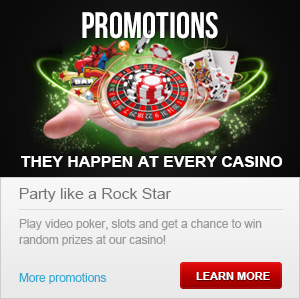
<style>
.page{position:relative;width:300px;height:299px}
.page>*{position:absolute;margin:0}
.t1{font:36.7px "BebasNeue";color:#ffffff}
.t2{font:15.4px "Arial-BoldMT";color:#ffffff}
.t3{font:15.4px "ArialMT";color:#747474}
.t4{font:11.7px/16px "ArialMT";color:#999999}
.t5{font:11.7px "ArialMT";color:#37abd3}
.t6{font:11px "Arial-BoldMT";color:#ffffff}
</style>
<div class="page">
<p class="t1" style="left:82px;top:12px;width:136px;height:27px">Promotions</p>
<p class="t2" style="left:21px;top:156px;width:262px;height:11px">THEY HAPPEN AT EVERY CASINO</p>
<p class="t3" style="left:19px;top:188px;width:152px;height:14px">Party like a Rock Star</p>
<p class="t4" style="left:19px;top:219px;width:243px;height:27px">Play video poker, slots and get a chance to win random prizes at our casino!</p>
<p class="t5" style="left:19px;top:273px;width:88px;height:11px">More promotions</p>
<p class="t6" style="left:196px;top:272px;width:74px;height:8px">LEARN MORE</p>
</div>
